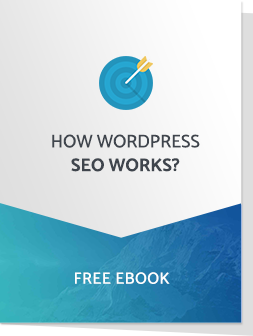
<style>
.page{position:relative;width:253px;height:336px}
.page>*{position:absolute;margin:0}
.t1{font:18.2px/23.7px "Catamaran-Medium";color:#3f454d}
.t2{font:18.2px/23.7px "Catamaran-Bold";color:#3f454d}
.t3{font:16.2px "Catamaran-SemiBold";letter-spacing:0.02em;color:#ffffff}
</style>
<div class="page">
<p class="t1" style="left:52px;top:134px;width:148px;height:38px;text-align:center">HOW WORDPRESS<br><span class="t2">SEO WORKS?</span></p>
<p class="t3" style="left:75px;top:272px;width:95px;height:12px">FREE EBOOK</p>
</div>
